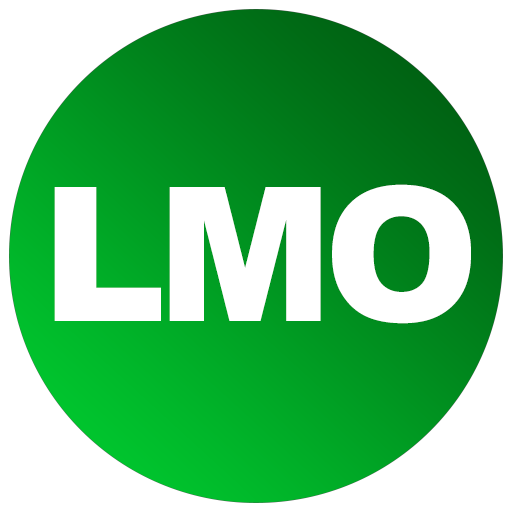
<style>
.page{position:relative;width:512px;height:512px;background:#ffffff}
.page>*{position:absolute;margin:0}
.t1{font:187px "Arial-Black";letter-spacing:-0.05em;color:#ffffff}
</style>
<div class="page">
<p class="t1" style="left:54px;top:184px;width:417px;height:140px">LMO</p>
</div>
